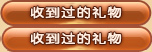
<style>
.page{position:relative;width:152px;height:52px}
.page>*{position:absolute;margin:0}
.t1{font:12px "HYe3gj";letter-spacing:0.05em;color:#ffeee1;font-weight:bold;scale:1.2 1}
</style>
<div class="page">
<p class="t1" style="left:30px;top:6px;width:92px;height:13px">收到过的礼物</p>
<p class="t1" style="left:30px;top:32px;width:92px;height:13px">收到过的礼物</p>
</div>
